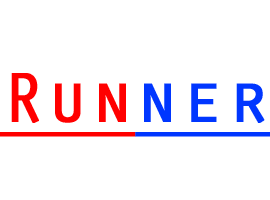
<style>
.page{position:relative;width:270px;height:200px;background:#ffffff}
.page>*{position:absolute;margin:0}
.t1{font:72px "OratorStd";color:#ff0000;font-weight:bold;text-decoration:underline}
.t2{font:72px "OratorStd";color:#0036ff;font-weight:bold;text-decoration:underline}
</style>
<div class="page">
<p class="t1" style="left:0px;top:73px;width:271px;height:64px">Run<span class="t2">ner</span></p>
</div>
